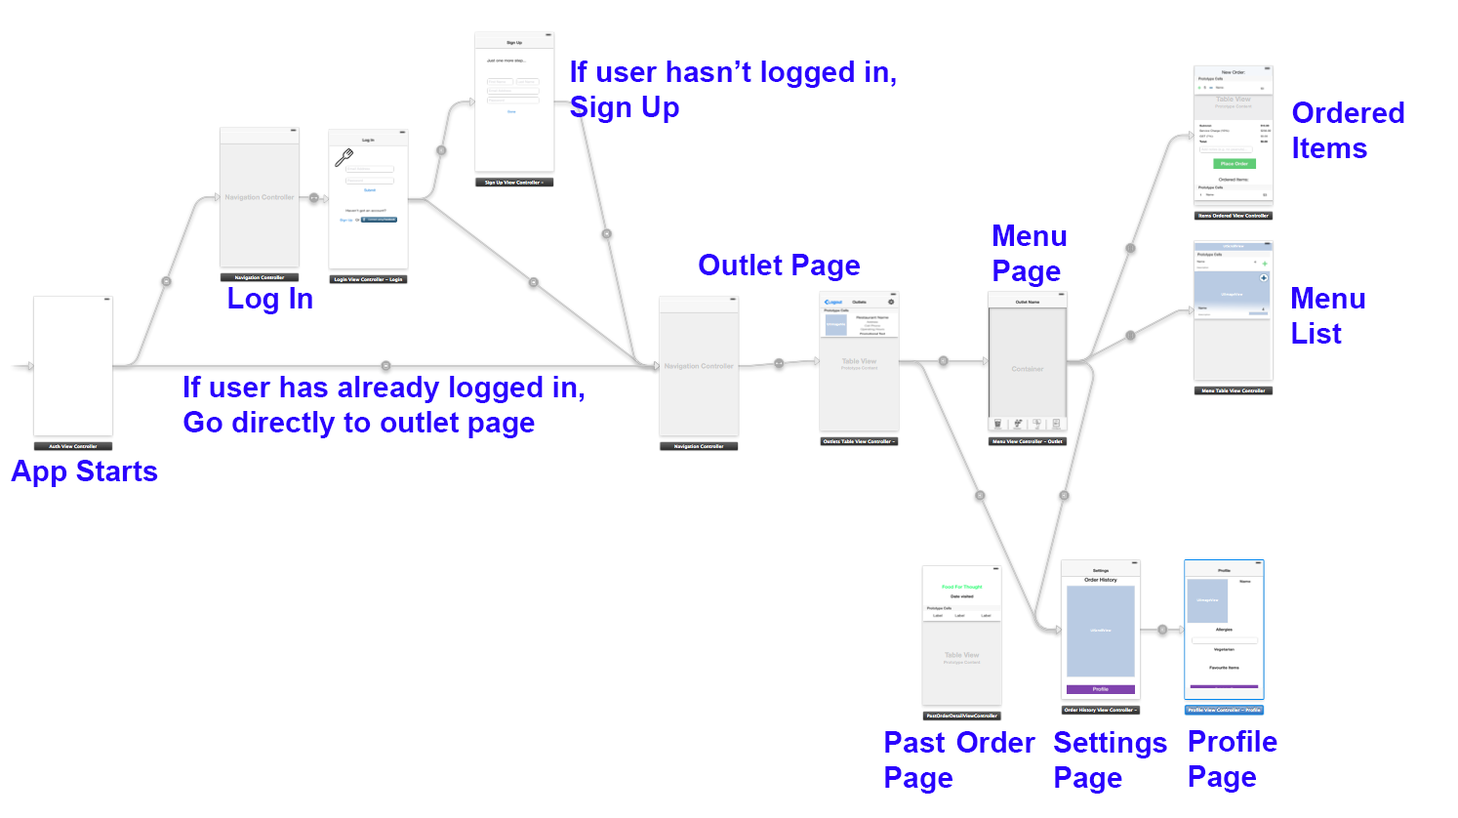
<style>
.page{position:relative;width:1458px;height:818px;background:#ffffff}
.page>*{position:absolute;margin:0}
.t1{font:29.3px "Arial-BoldMT";color:#2b02fe}
</style>
<div class="page">
<p class="t1" style="left:570px;top:61px;width:326px;height:62px">If user hasn’t logged in,<br>Sign Up</p>
<p class="t1" style="left:1292px;top:101px;width:112px;height:57px">Ordered<br>Items</p>
<p class="t1" style="left:993px;top:224px;width:74px;height:63px">Menu <br>Page</p>
<p class="t1" style="left:699px;top:254px;width:161px;height:27px">Outlet Page</p>
<p class="t1" style="left:228px;top:287px;width:84px;height:27px">Log In</p>
<p class="t1" style="left:1292px;top:287px;width:73px;height:57px">Menu<br>List</p>
<p class="t1" style="left:183px;top:376px;width:402px;height:62px">If user has already logged in,<br>Go directly to outlet page</p>
<p class="t1" style="left:11px;top:460px;width:147px;height:27px">App Starts</p>
<p class="t1" style="left:885px;top:731px;width:151px;height:62px">Past Order<br>Page</p>
<p class="t1" style="left:1054px;top:731px;width:113px;height:62px">Settings<br>Page</p>
<p class="t1" style="left:1189px;top:730px;width:88px;height:62px">Profile<br>Page</p>
</div>
